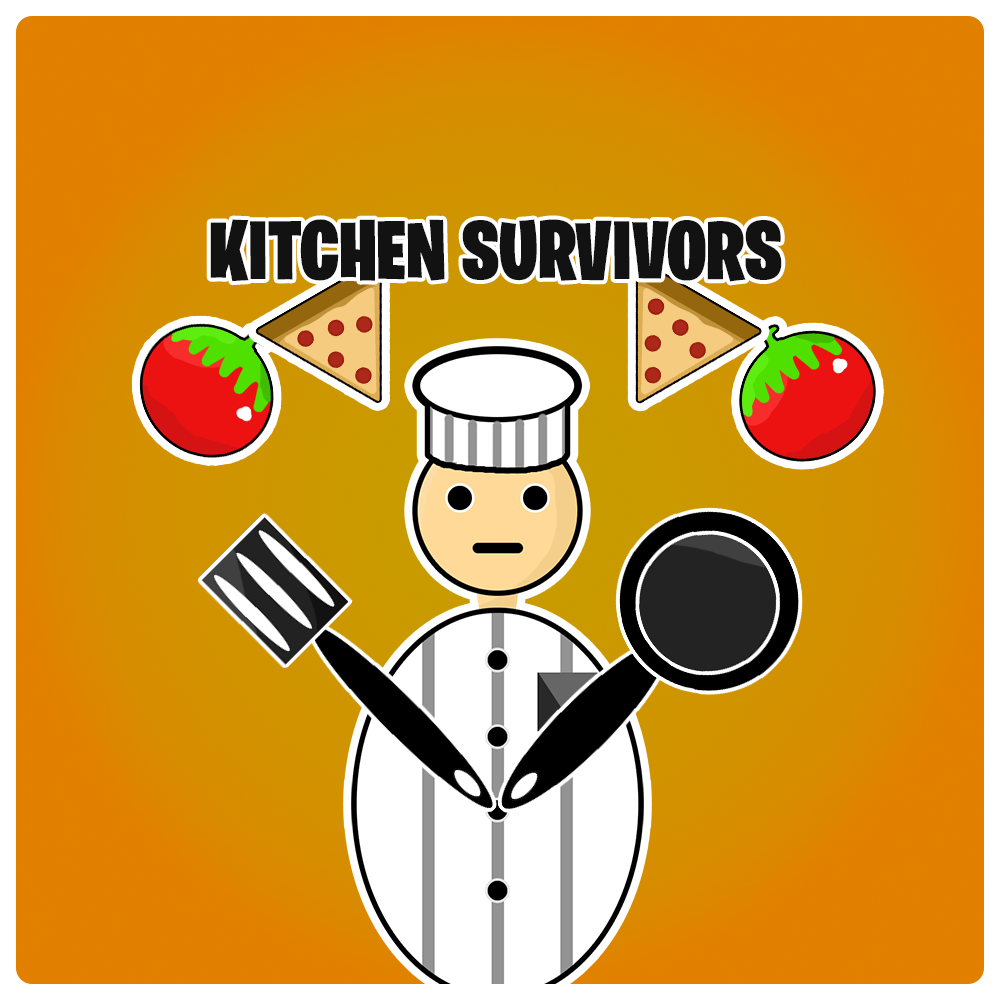
<style>
.page{position:relative;width:1000px;height:1000px}
.page>*{position:absolute;margin:0}
.t1{font:83.2px "BurbankBigCondensed-Black";color:#121212}
</style>
<div class="page">
<p class="t1" style="left:210px;top:219px;width:572px;height:63px">KITCHEN SURVIVORS</p>
</div>
